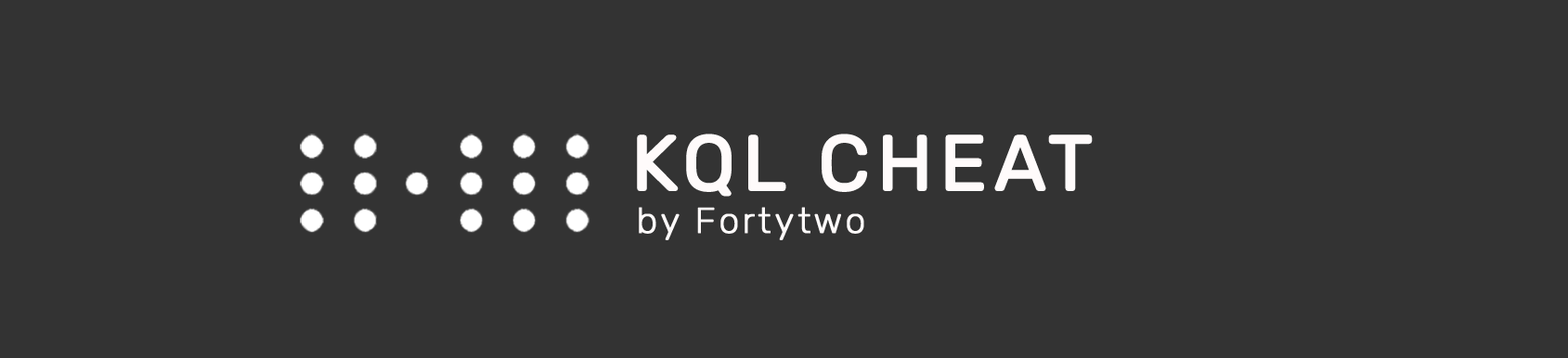
<style>
.page{position:relative;width:1568px;height:358px;background:#333333}
.page>*{position:absolute;margin:0}
.t1{font:77.3px "Rubik-Regular";letter-spacing:0.07em;color:#fffbfb;font-weight:bold}
.t2{font:36.1px "Rubik-Light";letter-spacing:0.07em;color:#fffbfb;font-weight:bold}
</style>
<div class="page">
<p class="t1" style="left:637px;top:134px;width:456px;height:63px">KQL CHEAT</p>
<p class="t2" style="left:639px;top:207px;width:225px;height:33px">by Fortytwo</p>
</div>
